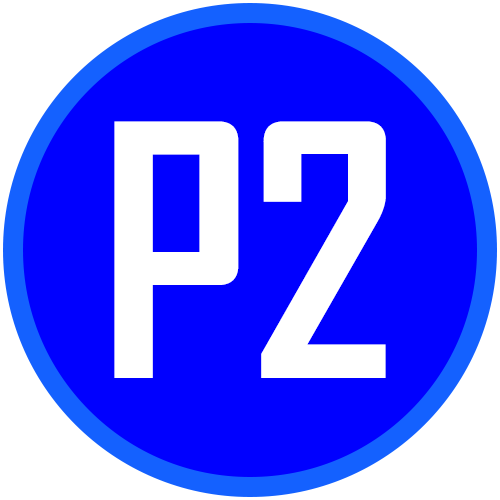
<style>
.page{position:relative;width:500px;height:500px;background:#0000ff}
.page>*{position:absolute;margin:0}
.t1{font:335.4px "AgencyFB-Bold";color:#ffffff}
</style>
<div class="page">
<p class="t1" style="left:114px;top:121px;width:272px;height:257px">P2</p>
</div>
